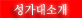
<style>
.page{position:relative;width:82px;height:20px;background:#ff0000}
.page>*{position:absolute;margin:0}
.t1{font:12px "BatangChe";color:#ffffff;scale:0.9 1}
</style>
<div class="page">
<p class="t1" style="left:14px;top:4px;width:53px;height:12px">성가대소개</p>
</div>
